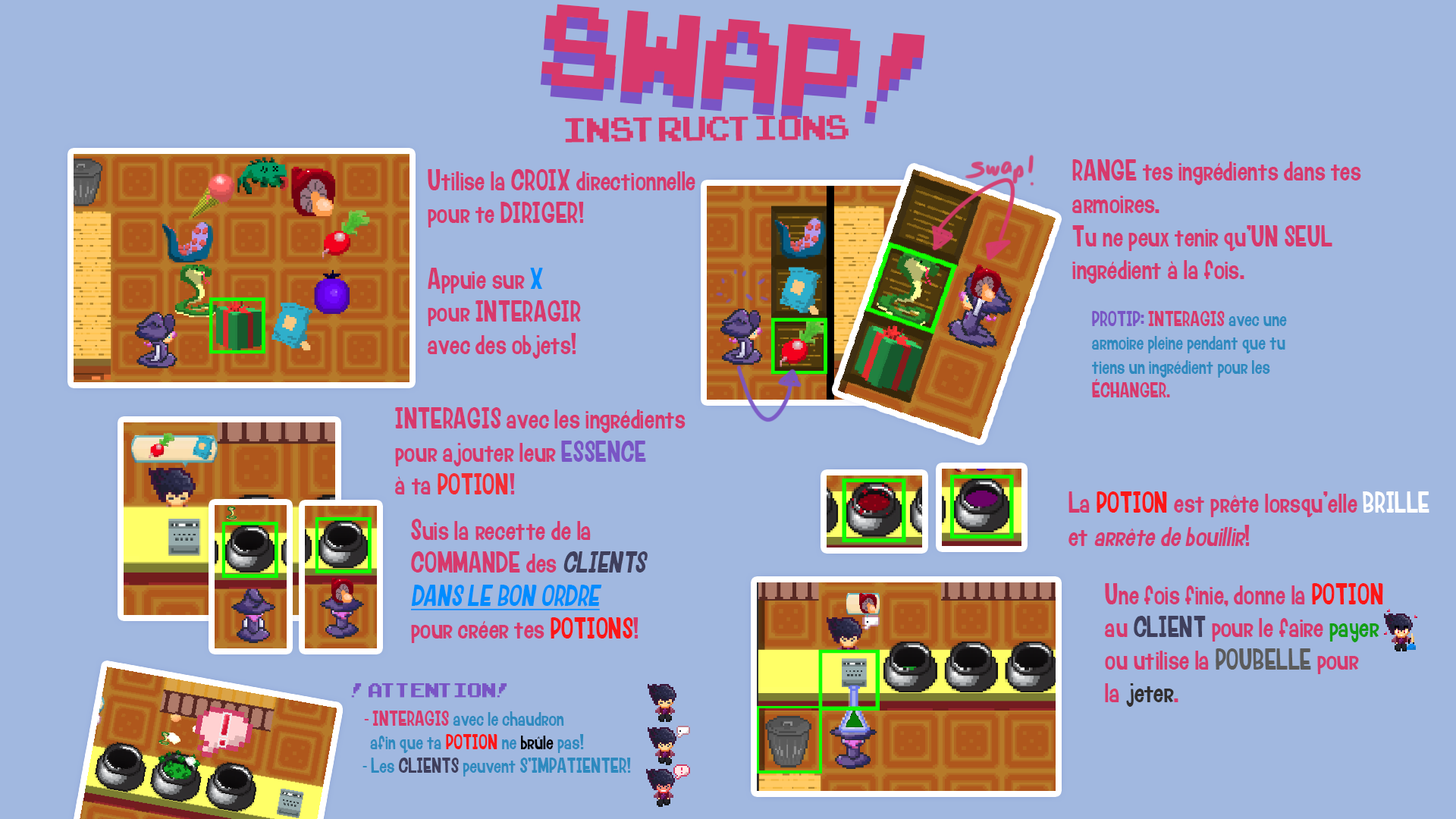
<style>
.page{position:relative;width:1456px;height:819px;background:#a1b8e0}
.page>*{position:absolute;margin:0}
.t1{font:162.8px "ArcadeClassic";color:#d7396c;scale:0.9 1}
.t2{font:162.8px "ArcadeClassic";scale:0.9 1}
.t3{font:48.4px "ArcadeClassic";color:#d7396c;scale:0.9 1}
.t4{font:27.3px "Lumberjack-Regular";color:#d7396c;scale:0.9 1}
.t5{font:19.7px "Lumberjack-Regular";color:#7955c5;scale:0.9 1}
.t6{font:19.7px "Lumberjack-Regular";color:#d7396c;scale:0.9 1}
.t7{font:19.7px "Lumberjack-Regular";color:#2e8abf;scale:0.9 1}
.t8{font:27.3px "Lumberjack-Regular";color:#008cff;scale:0.9 1}
.t9{font:27.3px "Lumberjack-Regular";color:#7955c5;scale:0.9 1}
.t10{font:27.3px "Lumberjack-Regular";color:#f22e34;scale:0.9 1}
.t11{font:27.3px "Lumberjack-Regular";color:#fb1717;scale:0.9 1}
.t12{font:27.3px "Lumberjack-Regular";color:#ffffff;scale:0.9 1}
.t13{font:27.3px "Lumberjack-Regular";color:#d7396c;font-style:italic;scale:0.9 1}
.t14{font:27.3px "Lumberjack-Regular";color:#3f3f5d;font-style:italic;scale:0.9 1}
.t15{font:27.3px "Lumberjack-Regular";color:#008cff;font-style:italic;text-decoration:underline;scale:0.9 1}
.t16{font:27.3px "Lumberjack-Regular";color:#3f3f5d;scale:0.9 1}
.t17{font:27.3px "Lumberjack-Regular";color:#139f16;scale:0.9 1}
.t18{font:27.3px "Lumberjack-Regular";color:#5b5b5b;scale:0.9 1}
.t19{font:27.3px "Lumberjack-Regular";color:#312e2e;scale:0.9 1}
.t20{font:27.3px "ArcadeClassic";color:#7955c5;font-variant:small-caps;font-weight:bold;scale:0.9 1}
.t21{font:19.7px "Lumberjack-Regular";color:#fb1717;scale:0.9 1}
.t22{font:19.7px "Lumberjack-Regular";color:#000000;scale:0.9 1}
.t23{font:19.7px "Lumberjack-Regular";color:#3f3f5d;scale:0.9 1}
</style>
<div class="page">
<p class="t1" style="left:541px;top:4px;width:384px;height:109px;rotate:5deg">SWAP!</p>
<p class="t2" style="left:540px;top:15px;width:384px;height:109px;rotate:5deg">SWAP!</p>
<p class="t3" style="left:565px;top:115px;width:284px;height:28px;rotate:-1deg">INSTRUCTIONS</p>
<p class="t4" style="left:1072px;top:159px;width:289px;height:239px;text-align:justify">RANGE tes ingrédients dans tes<br>armoires.<br>Tu ne peux tenir qu’UN SEUL<br>ingrédient à la fois.<br><br><span class="t5">     PROTIP: </span><span class="t6">INTERAGIS</span><span class="t7"> avec une<br>     armoire pleine pendant que tu<br>     tiens un ingrédient pour les<br></span><span class="t6">     ÉCHANGER.</span></p>
<p class="t4" style="left:428px;top:169px;width:267px;height:190px;text-align:justify">Utilise la CROIX directionnelle<br>pour te DIRIGER!<br><br>Appuie sur <span class="t8">X </span><br>pour INTERAGIR<br>avec des objets!</p>
<p class="t4" style="left:395px;top:407px;width:291px;height:87px;text-align:justify">INTERAGIS avec les ingrédients<br>pour ajouter leur <span class="t9">ESSENCE<br></span>à ta <span class="t10">POTION</span>!</p>
<p class="t4" style="left:1068px;top:491px;width:361px;height:55px;text-align:justify">La <span class="t11">POTION </span>est prête lorsqu’elle <span class="t12">BRILLE<br></span>et <span class="t13">arrête de bouillir</span>!</p>
<p class="t4" style="left:410px;top:519px;width:238px;height:124px;text-align:justify">Suis la recette de la<br>COMMANDE des <span class="t14">CLIENTS<br></span><span class="t15">DANS LE BON ORDRE<br></span>pour créer tes <span class="t11">POTIONS</span>!</p>
<p class="t4" style="left:1105px;top:583px;width:278px;height:124px;text-align:justify">Une fois finie, donne la <span class="t11">POTION<br></span>au <span class="t16">CLIENT </span>pour le faire <span class="t17">payer<br></span>ou utilise la <span class="t18">POUBELLE </span>pour<br>la <span class="t19">jeter</span>.</p>
<p class="t7" style="left:351px;top:683px;width:280px;height:94px;text-align:justify"><span class="t20">!ATTENTION!<br>   </span><span class="t6">- INTERAGIS </span>avec le chaudron<br>     afin que ta <span class="t21">POTION </span>ne <span class="t22">brûle </span>pas!<br>   - Les <span class="t23">CLIENTS </span>peuvent S’IMPATIENTER!</p>
</div>
